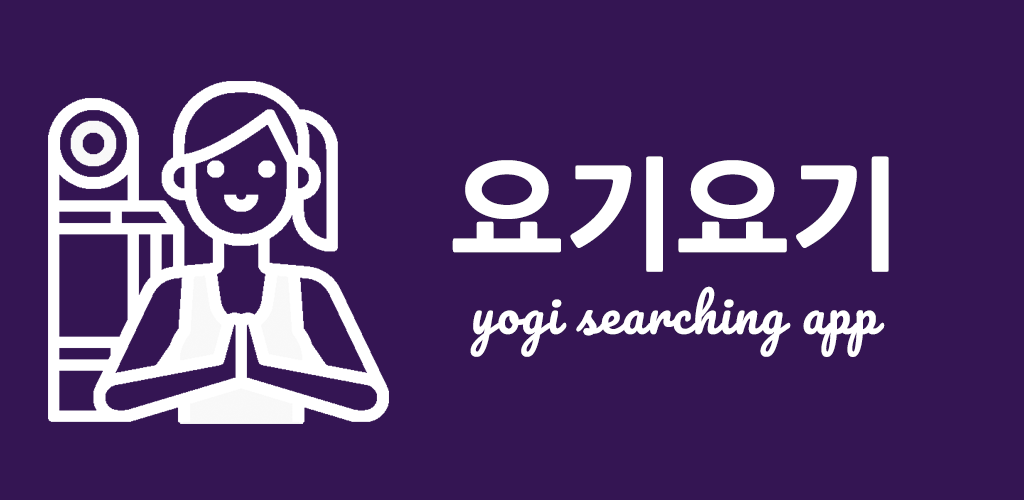
<style>
.page{position:relative;width:1024px;height:500px;background:#341553}
.page>*{position:absolute;margin:0}
.t1{font:120px "NanumGothicExtraBold";color:#ffffff}
.t2{font:50px "Pacifico-Regular";letter-spacing:0.04em;color:#ffffff}
</style>
<div class="page">
<p class="t1" style="left:452px;top:156px;width:437px;height:116px">요기요기</p>
<p class="t2" style="left:470px;top:286px;width:415px;height:71px">yogi searching app</p>
</div>
